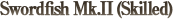
<style>
.page{position:relative;width:195px;height:19px;background:#ffffff}
.page>*{position:absolute;margin:0}
.t1{font:18px "RyuminPro-ExBold";letter-spacing:-0.08em;color:#4a3f32;font-weight:bold;scale:0.9 1}
</style>
<div class="page">
<p class="t1" style="left:0px;top:1px;width:173px;height:18px">Swordfish Mk.II (Skilled)</p>
</div>
